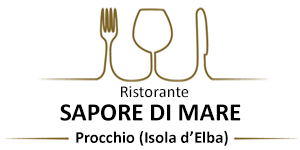
<style>
.page{position:relative;width:300px;height:150px;background:#ffffff}
.page>*{position:absolute;margin:0}
.t1{font:16.8px "Calibri";color:#000000}
.t2{font:25.2px "Calibri-Bold";color:#000000}
.t3{font:16.8px "Calibri-Bold";color:#000000}
</style>
<div class="page">
<p class="t1" style="left:121px;top:86px;width:68px;height:12px">Ristorante</p>
<p class="t2" style="left:60px;top:104px;width:181px;height:17px">SAPORE DI MARE</p>
<p class="t3" style="left:76px;top:131px;width:152px;height:15px">Procchio (Isola d’Elba)</p>
</div>
